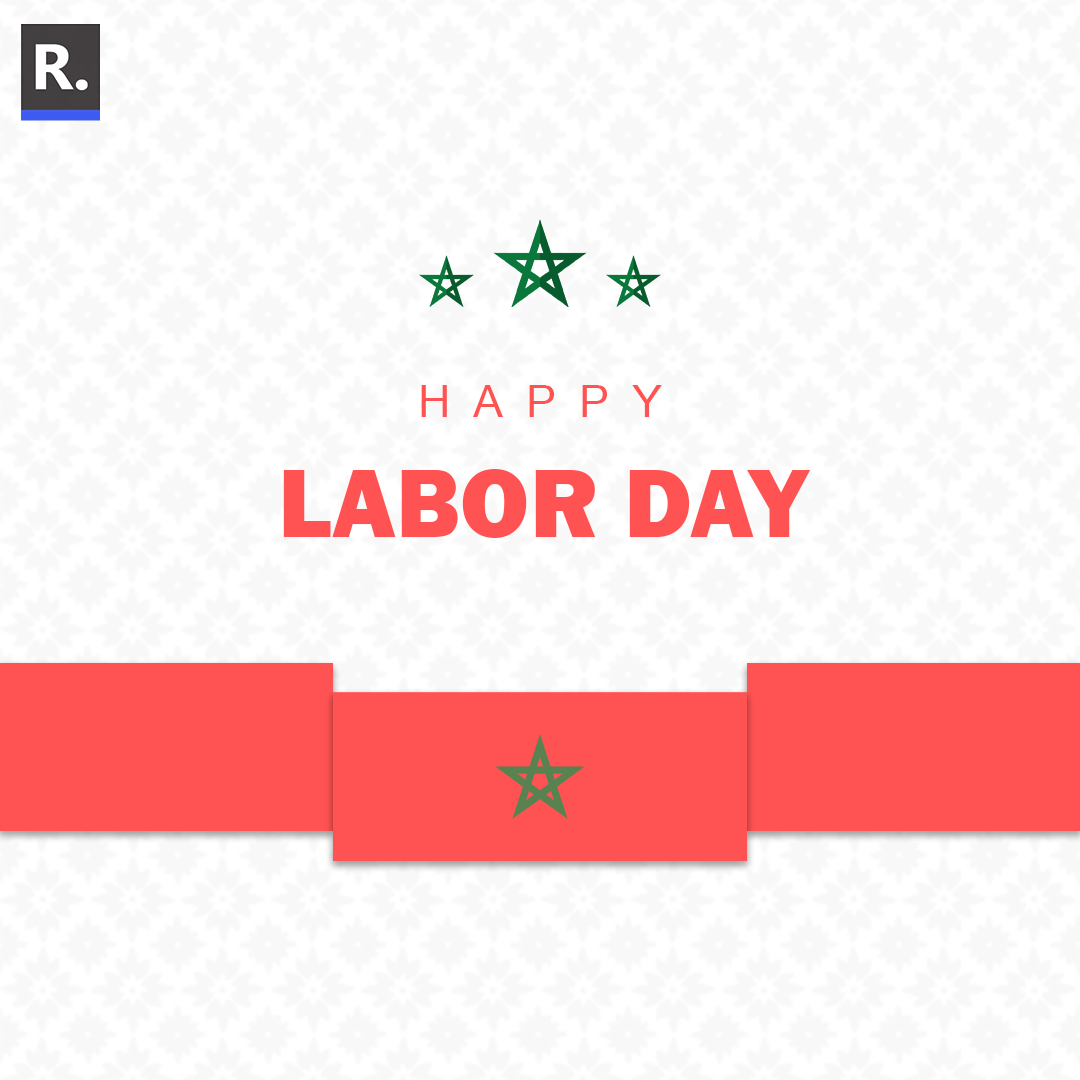
<style>
.page{position:relative;width:1080px;height:1080px;background:#ffffff}
.page>*{position:absolute;margin:0}
.t1{font:45.3px "MicrosoftSansSerif";letter-spacing:0.5em;color:#ff5353}
.t2{font:100.5px "FranklinGothic-Heavy";color:#ff5353}
</style>
<div class="page">
<p class="t1" style="left:421px;top:385px;width:241px;height:32px">HAPPY</p>
<p class="t2" style="left:283px;top:469px;width:528px;height:69px">LABOR DAY</p>
</div>
